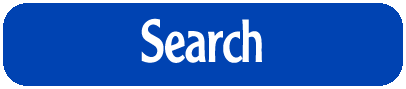
<style>
.page{position:relative;width:406px;height:89px;background:#0043b2}
.page>*{position:absolute;margin:0}
.t1{font:60px "ClearDBNormal";color:#ffffff;scale:0.87 1}
</style>
<div class="page">
<p class="t1" style="left:141px;top:18px;width:121px;height:45px">Search</p>
</div>
